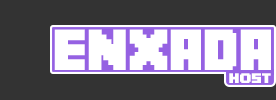
<style>
.page{position:relative;width:276px;height:100px;background:#333333}
.page>*{position:absolute;margin:0}
.t1{font:51.8px "Minecrafter";color:#ffffff}
.t2{font:12.5px "Minecrafter";color:#ffffff;scale:1.18 1}
</style>
<div class="page">
<p class="t1" style="left:54px;top:29px;width:217px;height:41px">ENXADA</p>
<p class="t2" style="left:229px;top:73px;width:42px;height:10px">HOST</p>
</div>
